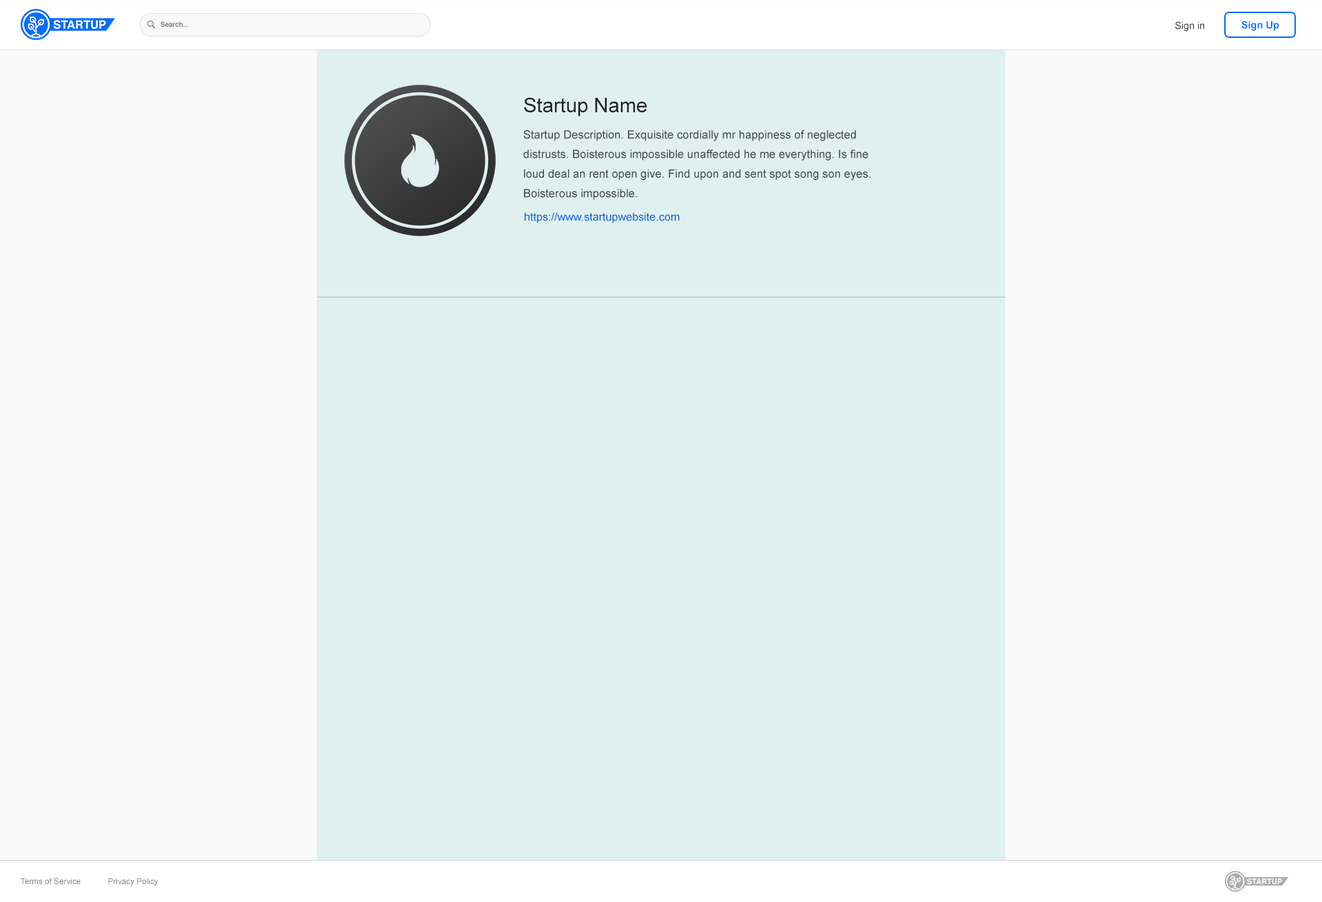
<style>
.page{position:relative;width:1322px;height:902px;background:#dff0ef}
.page>*{position:absolute;margin:0}
.t1{font:7px "Helvetica-Bold";color:#797979}
.t2{font:9.9px "ArialMT";color:#3e3e3e}
.t3{font:10.1px "Arial-BoldMT";color:#0072ff}
.t4{font:20.1px "ArialMT";color:#232323}
.t5{font:11.5px/19.6px "ArialMT";color:#474b4a}
.t6{font:11.1px "ArialMT";color:#0060d5}
.t7{font:8.1px "ArialMT";color:#828282}
</style>
<div class="page">
<p class="t1" style="left:160px;top:21px;width:28px;height:6px">Search...</p>
<p class="t2" style="left:1175px;top:21px;width:29px;height:11px">Sign in</p>
<p class="t3" style="left:1241px;top:21px;width:38px;height:10px">Sign Up</p>
<p class="t4" style="left:524px;top:97px;width:123px;height:19px">Startup Name</p>
<p class="t5" style="left:523px;top:130px;width:347px;height:70px">Startup Description. Exquisite cordially mr happiness of neglected distrusts. Boisterous impossible unaffected he me everything. Is fine loud deal an rent open give. Find upon and sent spot song son eyes. Boisterous impossible.</p>
<p class="t6" style="left:525px;top:212px;width:155px;height:11px">https://www.startupwebsite.com</p>
<p class="t7" style="left:21px;top:878px;width:60px;height:7px">Terms of Service</p>
<p class="t7" style="left:108px;top:878px;width:50px;height:8px">Privacy Policy</p>
</div>
